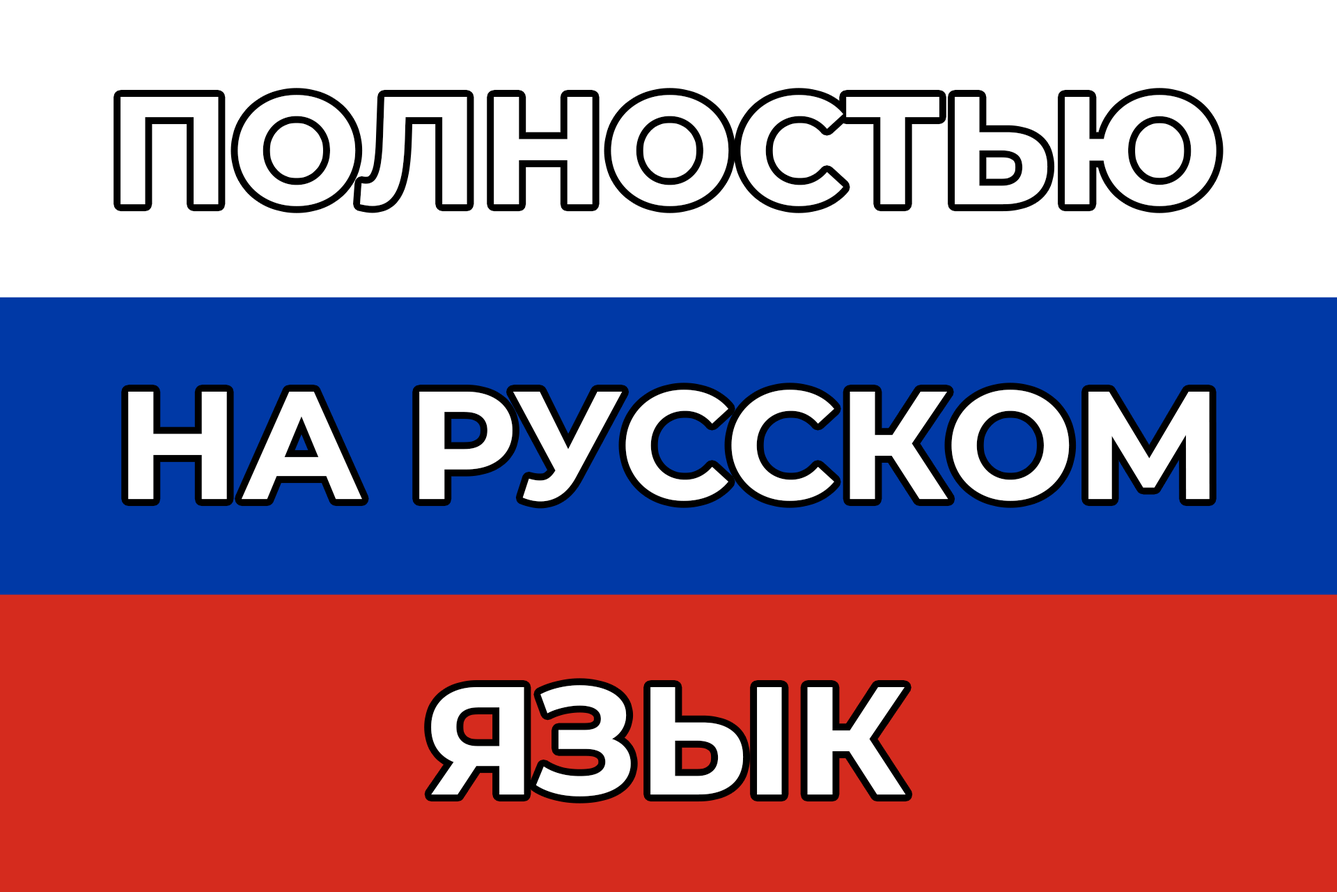
<style>
.page{position:relative;width:1337px;height:892px;background:#ffffff}
.page>*{position:absolute;margin:0}
.t1{font:153.2px "Montserrat-Bold";color:#ffffff}
</style>
<div class="page">
<p class="t1" style="left:121px;top:95px;width:1096px;height:111px">ПОЛНОСТЬЮ</p>
<p class="t1" style="left:128px;top:389px;width:1082px;height:113px">НА РУССКОМ</p>
<p class="t1" style="left:431px;top:685px;width:475px;height:111px">ЯЗЫК</p>
</div>
